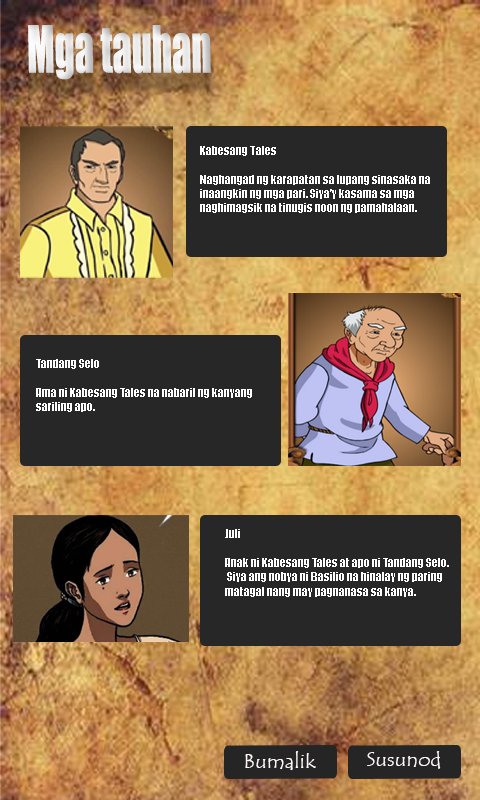
<style>
.page{position:relative;width:480px;height:800px;background:#272727}
.page>*{position:absolute;margin:0}
.t1{font:60px "Impact";color:#ffffff;scale:0.64 1}
.t2{font:12px "Impact";color:#ffffff}
.t3{font:20px "TempusSansITC";color:#fef8f8;scale:1.06 1}
</style>
<div class="page">
<p class="t1" style="left:28px;top:25px;width:183px;height:55px">Mga tauhan</p>
<p class="t2" style="left:200px;top:146px;width:230px;height:67px">Kabesang Tales<br><br>Naghangad ng karapatan sa lupang sinasaka na <br>inaangkin ng mga pari. Siya’y kasama sa mga <br>naghimagsik na tinugis noon ng pamahalaan.</p>
<p class="t2" style="left:36px;top:359px;width:216px;height:53px">Tandang Selo<br><br>Ama ni Kabesang Tales na nabaril ng kanyang <br>sariling apo.</p>
<p class="t2" style="left:225px;top:529px;width:224px;height:68px">Juli<br><br>Anak ni Kabesang Tales at apo ni Tandang Selo.<br> Siya ang nobya ni Basilio na hinalay ng paring <br>matagal nang may pagnanasa sa kanya.</p>
<p class="t3" style="left:245px;top:751px;width:71px;height:19px">Bumalik</p>
<p class="t3" style="left:367px;top:751px;width:74px;height:18px">Susunod</p>
</div>
